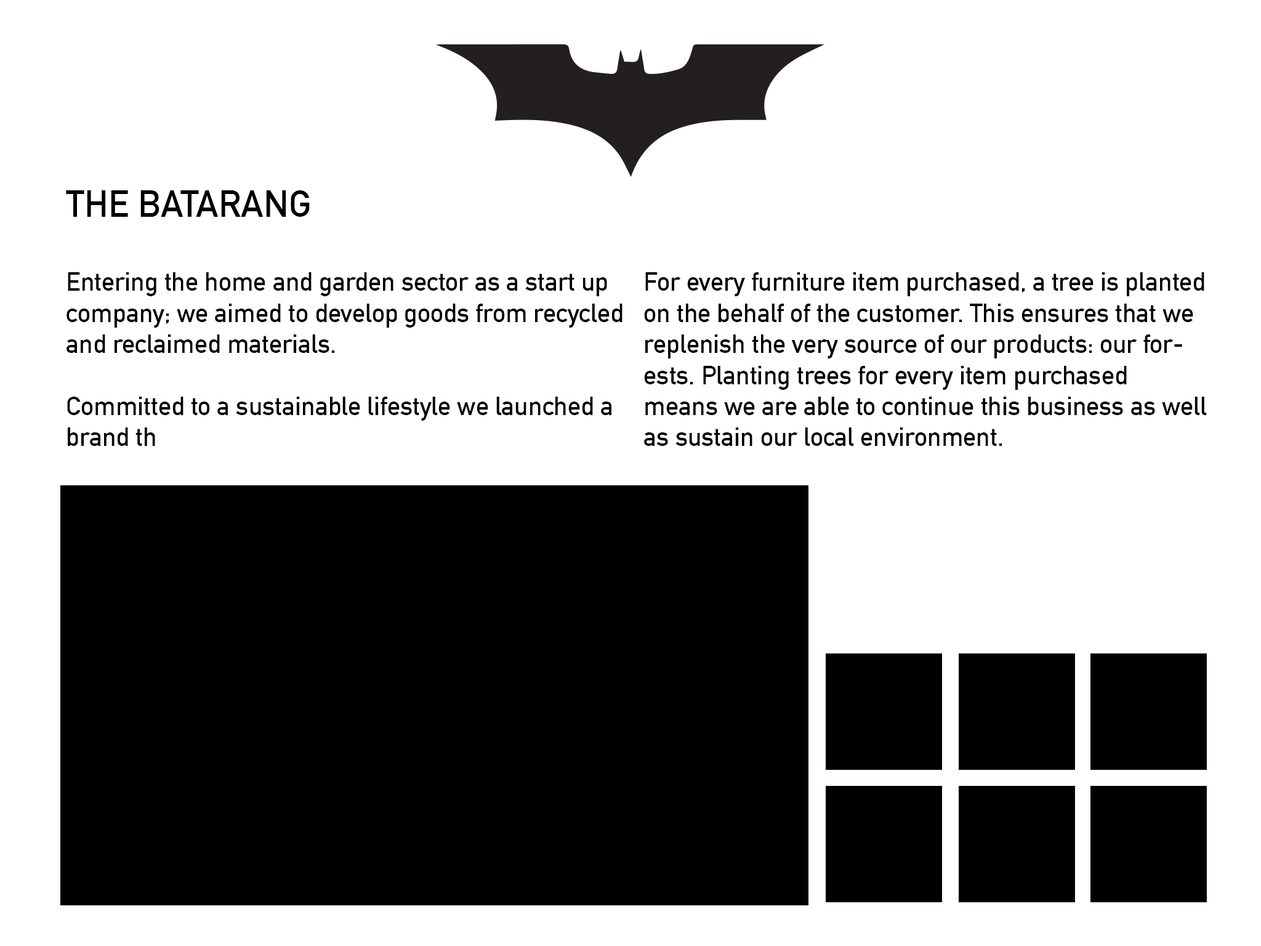
<style>
.page{position:relative;width:1261px;height:946px;background:#ffffff}
.page>*{position:absolute;margin:0}
.t1{font:36.9px "DINAlternate-Bold";color:#000000;text-transform:uppercase}
.t2{font:25.9px "DINAlternate-Bold";color:#000000}
</style>
<div class="page">
<p class="t1" style="left:66px;top:190px;width:244px;height:27px">The Batarang</p>
<p class="t2" style="left:66px;top:272px;width:556px;height:174px">Entering the home and garden sector as a start up company; we aimed to develop goods from recycled and reclaimed materials.<br><br>Committed to a sustainable lifestyle we launched a brand th<br><br><br>on the behalf of the customer. This ensures that we replenish the very source of our products: our forests. Planting trees for every item purchased means we are able to continue this business as well as sustain our local environment.</p>
<p class="t2" style="left:644px;top:272px;width:563px;height:174px">For every furniture item purchased, a tree is planted on the behalf of the customer. This ensures that we replenish the very source of our products: our forests. Planting trees for every item purchased means we are able to continue this business as well as sustain our local environment.</p>
</div>
